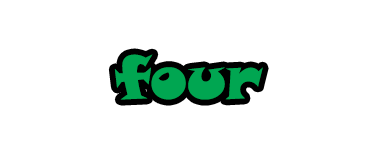
<style>
.page{position:relative;width:380px;height:161px;background:#ffffff}
.page>*{position:absolute;margin:0}
.t1{font:60px "SnapITC-Regular";color:#00a651}
</style>
<div class="page">
<p class="t1" style="left:114px;top:54px;width:149px;height:46px">four</p>
</div>
